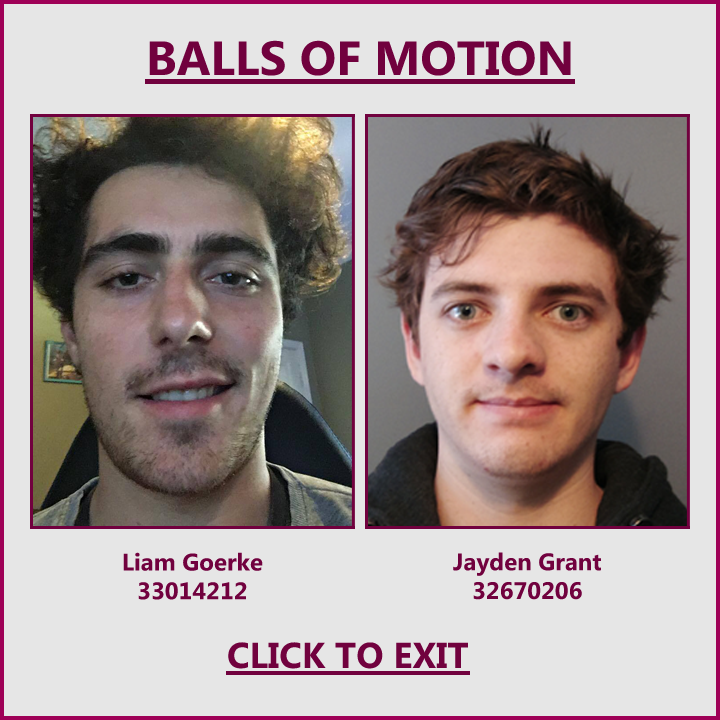
<style>
.page{position:relative;width:720px;height:720px;background:#e6e6e6}
.page>*{position:absolute;margin:0}
.t1{font:24px "MicrosoftPhagsPa-Bold";color:#71013e}
.t2{font:36px "MicrosoftPhagsPa-Bold";color:#71013e}
</style>
<div class="page">
<p class="t1" style="left:123px;top:552px;width:140px;height:48px;text-align:center">Liam Goerke<br>33014212</p>
<p class="t1" style="left:453px;top:552px;width:148px;height:48px;text-align:center">Jayden Grant<br>32670206</p>
<p class="t2" style="left:228px;top:642px;width:240px;height:27px">CLICK TO EXIT</p>
</div>
